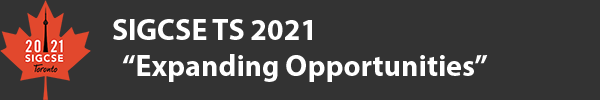
<style>
.page{position:relative;width:600px;height:100px;background:#333333}
.page>*{position:absolute;margin:0}
.t1{font:30px "MyriadPro-Bold";color:#ffffff}
</style>
<div class="page">
<p class="t1" style="left:113px;top:19px;width:375px;height:63px">SIGCSE TS 2021<br>  “Expanding Opportunities”</p>
</div>
